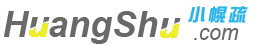
<style>
.page{position:relative;width:261px;height:45px;background:#ffffff}
.page>*{position:absolute;margin:0}
.t1{font:18px "DFZongYi-Bd-80-Win-GB";letter-spacing:0.075em;color:#2db4ea;font-style:italic}
.t2{font:36px "Arial-BoldItalicMT";color:#696967}
.t3{font:22px "Arial-ItalicMT";color:#696967;scale:0.96 1}
</style>
<div class="page">
<p class="t1" style="left:188px;top:6px;width:60px;height:17px">小  疏</p>
<p class="t2" style="left:3px;top:11px;width:155px;height:33px">H  angSh</p>
<p class="t3" style="left:194px;top:28px;width:45px;height:12px">.com</p>
</div>
